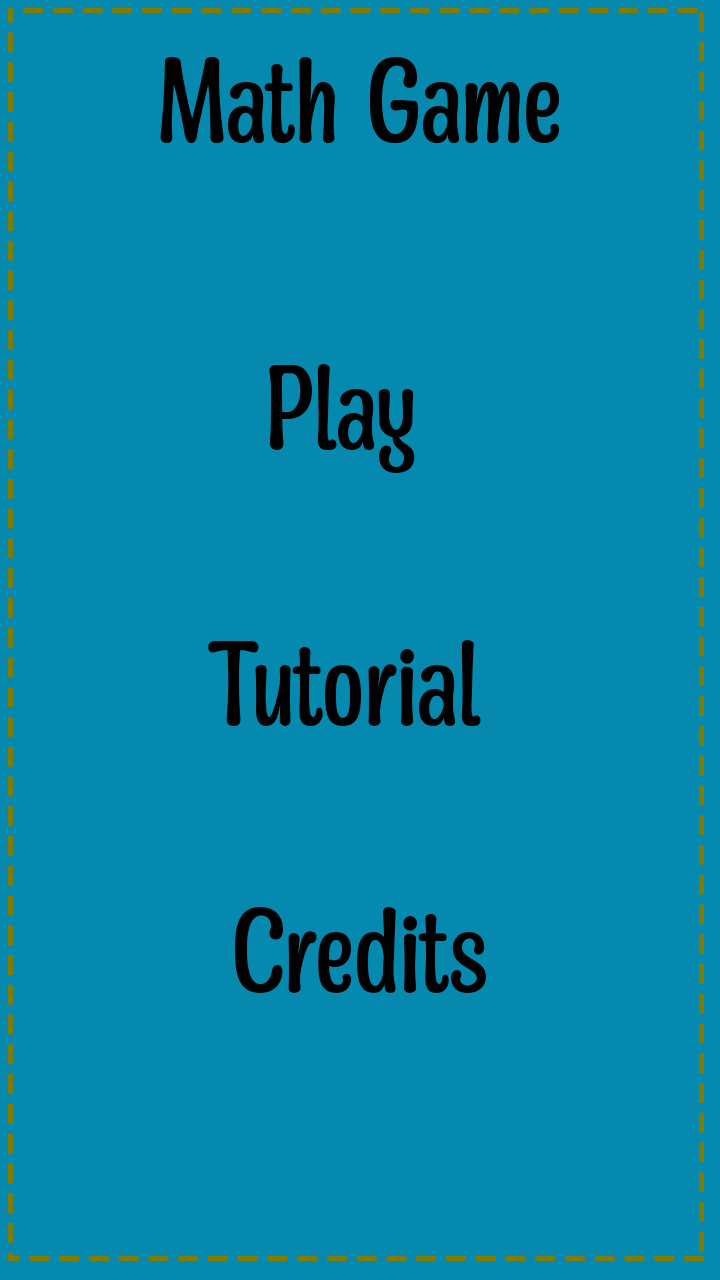
<style>
.page{position:relative;width:720px;height:1280px;background:#0689af}
.page>*{position:absolute;margin:0}
.t1{font:122px "Mangabey-Regular";color:#000000}
</style>
<div class="page">
<p class="t1" style="left:269px;top:364px;width:146px;height:109px">Play</p>
<p class="t1" style="left:208px;top:640px;width:273px;height:87px">Tutorial</p>
<p class="t1" style="left:235px;top:907px;width:251px;height:87px">Credits</p>
</div>
